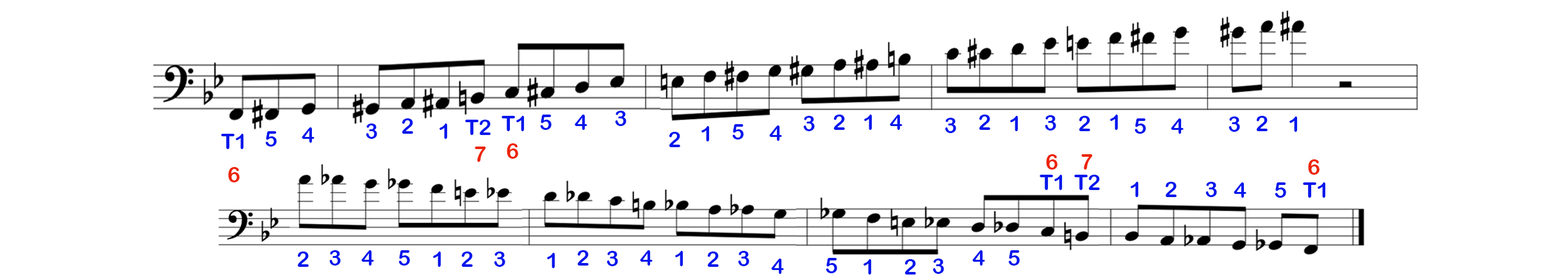
<style>
.page{position:relative;width:1568px;height:279px;background:#ffffff}
.page>*{position:absolute;margin:0}
.t1{font:21.8px "ArialRoundedMTBold";color:#0417ec}
.t2{font:21.8px "ArialRoundedMTBold";color:#ec2404}
</style>
<div class="page">
<p class="t1" style="left:615px;top:111px;width:11px;height:15px">3</p>
<p class="t1" style="left:366px;top:124px;width:11px;height:15px">3</p>
<p class="t1" style="left:402px;top:118px;width:11px;height:16px">2</p>
<p class="t1" style="left:439px;top:124px;width:9px;height:15px">1</p>
<p class="t1" style="left:465px;top:120px;width:26px;height:15px">T2</p>
<p class="t1" style="left:502px;top:116px;width:23px;height:15px">T1</p>
<p class="t1" style="left:540px;top:115px;width:11px;height:15px">5</p>
<p class="t1" style="left:575px;top:115px;width:12px;height:15px">4</p>
<p class="t1" style="left:732px;top:124px;width:12px;height:16px">5</p>
<p class="t1" style="left:769px;top:126px;width:13px;height:15px">4</p>
<p class="t1" style="left:803px;top:116px;width:12px;height:15px">3</p>
<p class="t1" style="left:833px;top:115px;width:12px;height:15px">2</p>
<p class="t1" style="left:864px;top:115px;width:8px;height:15px">1</p>
<p class="t1" style="left:890px;top:115px;width:12px;height:15px">4</p>
<p class="t1" style="left:945px;top:118px;width:11px;height:15px">3</p>
<p class="t1" style="left:979px;top:115px;width:11px;height:15px">2</p>
<p class="t1" style="left:1010px;top:116px;width:8px;height:15px">1</p>
<p class="t1" style="left:1045px;top:115px;width:11px;height:16px">3</p>
<p class="t1" style="left:1079px;top:116px;width:11px;height:15px">2</p>
<p class="t1" style="left:1110px;top:115px;width:8px;height:15px">1</p>
<p class="t1" style="left:1134px;top:118px;width:12px;height:16px">5</p>
<p class="t1" style="left:1171px;top:118px;width:13px;height:16px">4</p>
<p class="t1" style="left:1229px;top:117px;width:11px;height:15px">3</p>
<p class="t1" style="left:1256px;top:116px;width:12px;height:15px">2</p>
<p class="t1" style="left:1289px;top:117px;width:9px;height:15px">1</p>
<p class="t1" style="left:221px;top:134px;width:23px;height:15px">T1</p>
<p class="t1" style="left:265px;top:131px;width:12px;height:16px">5</p>
<p class="t1" style="left:302px;top:127px;width:12px;height:16px">4</p>
<p class="t1" style="left:669px;top:132px;width:11px;height:15px">2</p>
<p class="t1" style="left:701px;top:126px;width:9px;height:16px">1</p>
<p class="t2" style="left:475px;top:147px;width:11px;height:15px">7</p>
<p class="t2" style="left:507px;top:143px;width:11px;height:16px">6</p>
<p class="t2" style="left:1046px;top:154px;width:12px;height:16px">6</p>
<p class="t2" style="left:1081px;top:154px;width:12px;height:16px">7</p>
<p class="t2" style="left:1308px;top:159px;width:11px;height:16px">6</p>
<p class="t2" style="left:228px;top:167px;width:12px;height:16px">6</p>
<p class="t1" style="left:1040px;top:175px;width:23px;height:15px">T1</p>
<p class="t1" style="left:1074px;top:175px;width:26px;height:15px">T2</p>
<p class="t1" style="left:1131px;top:182px;width:8px;height:15px">1</p>
<p class="t1" style="left:1165px;top:182px;width:12px;height:15px">2</p>
<p class="t1" style="left:1205px;top:182px;width:12px;height:15px">3</p>
<p class="t1" style="left:1234px;top:183px;width:12px;height:15px">4</p>
<p class="t1" style="left:1275px;top:183px;width:11px;height:15px">5</p>
<p class="t1" style="left:1303px;top:183px;width:23px;height:15px">T1</p>
<p class="t1" style="left:297px;top:252px;width:12px;height:15px">2</p>
<p class="t1" style="left:329px;top:250px;width:12px;height:16px">3</p>
<p class="t1" style="left:361px;top:250px;width:13px;height:16px">4</p>
<p class="t1" style="left:398px;top:250px;width:12px;height:16px">5</p>
<p class="t1" style="left:433px;top:252px;width:8px;height:15px">1</p>
<p class="t1" style="left:461px;top:252px;width:12px;height:15px">2</p>
<p class="t1" style="left:494px;top:252px;width:11px;height:15px">3</p>
<p class="t1" style="left:547px;top:253px;width:8px;height:15px">1</p>
<p class="t1" style="left:577px;top:250px;width:12px;height:16px">2</p>
<p class="t1" style="left:607px;top:251px;width:11px;height:15px">3</p>
<p class="t1" style="left:640px;top:250px;width:13px;height:16px">4</p>
<p class="t1" style="left:675px;top:251px;width:8px;height:15px">1</p>
<p class="t1" style="left:707px;top:252px;width:12px;height:15px">2</p>
<p class="t1" style="left:738px;top:251px;width:11px;height:15px">3</p>
<p class="t1" style="left:972px;top:250px;width:13px;height:16px">4</p>
<p class="t1" style="left:1008px;top:250px;width:12px;height:16px">5</p>
<p class="t1" style="left:771px;top:259px;width:13px;height:15px">4</p>
<p class="t1" style="left:826px;top:258px;width:11px;height:16px">5</p>
<p class="t1" style="left:863px;top:259px;width:9px;height:16px">1</p>
<p class="t1" style="left:904px;top:259px;width:12px;height:16px">2</p>
<p class="t1" style="left:933px;top:259px;width:11px;height:15px">3</p>
</div>
